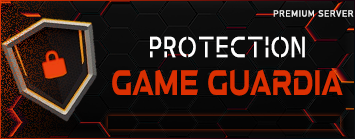
<style>
.page{position:relative;width:355px;height:139px}
.page>*{position:absolute;margin:0}
.t1{font:8.9px "Bahnschrift";letter-spacing:0.05em;color:#ffffff;text-transform:uppercase}
.t2{font:28.9px "Abang-Regular";letter-spacing:0.05em;color:#fffefe;text-transform:uppercase;scale:0.83 1}
.t3{font:31.3px "aAtmospheric";letter-spacing:0.05em;color:#ed4210;text-transform:uppercase;scale:0.7 1}
</style>
<div class="page">
<p class="t1" style="left:273px;top:10px;width:81px;height:7px">premium server</p>
<p class="t2" style="left:150px;top:36px;width:155px;height:22px">protection</p>
<p class="t3" style="left:112px;top:69px;width:231px;height:27px">game guardia</p>
</div>
